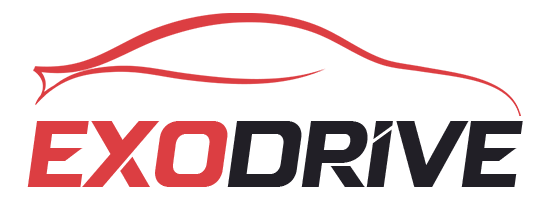
<style>
.page{position:relative;width:550px;height:200px;background:#ffffff}
.page>*{position:absolute;margin:0}
.t1{font:93.8px "Sakana-Regular";color:#211f26}
.t2{font:93.8px "Sakana-Regular";color:#dc3e42}
</style>
<div class="page">
<p class="t1" style="left:27px;top:121px;width:496px;height:66px"><span class="t2">EXO</span>DRIVE</p>
</div>
